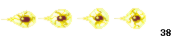
<style>
.page{position:relative;width:171px;height:36px;background:#ffffff}
.page>*{position:absolute;margin:0}
.t1{font:9px "Fixedsys";color:#000000}
</style>
<div class="page">
<p class="t1" style="left:160px;top:29px;width:11px;height:7px">38</p>
</div>
